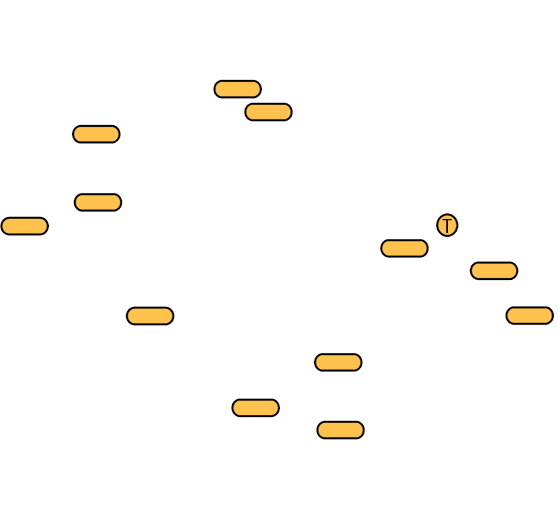
<style>
.page{position:relative;width:558px;height:518px;background:#ffffff}
.page>*{position:absolute;margin:0}
.t1{font:20.1px "MyriadPro-Regular";color:#000000;scale:0.93 1}
</style>
<div class="page">
<p class="t1" style="left:442px;top:219px;width:10px;height:14px">T</p>
</div>
